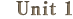
<style>
.page{position:relative;width:73px;height:19px;background:#ffffff}
.page>*{position:absolute;margin:0}
.t1{font:18px "RyuminPro-ExBold";letter-spacing:0.04em;font-weight:bold}
</style>
<div class="page">
<p class="t1" style="left:16px;top:1px;width:56px;height:15px">Unit 1</p>
</div>
